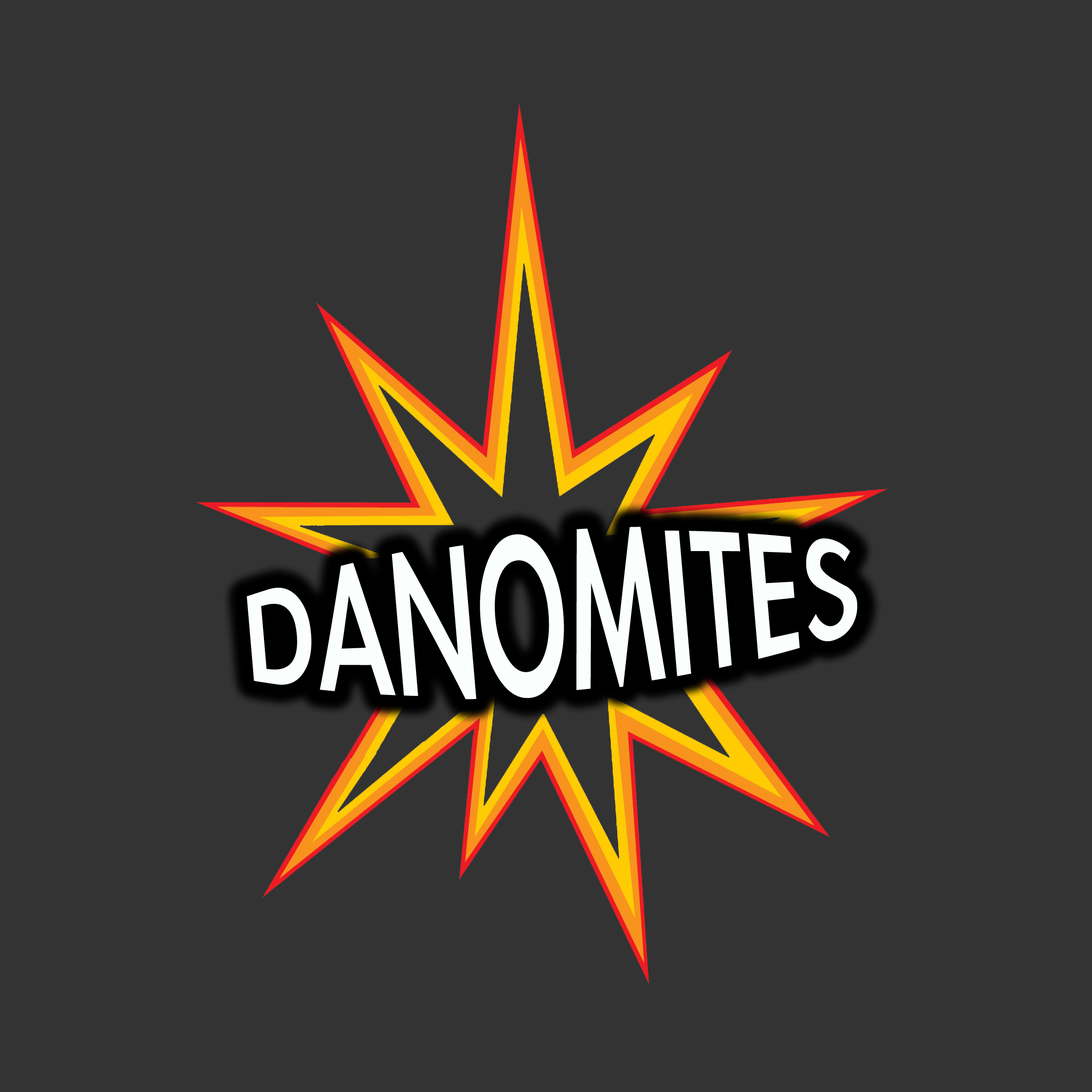
<style>
.page{position:relative;width:1092px;height:1092px;background:#333333}
.page>*{position:absolute;margin:0}
.t1{font:134.8px "LiGothicMed";letter-spacing:0.025em;color:#fafffe}
</style>
<div class="page">
<p class="t1" style="left:246px;top:527px;width:612px;height:172px;rotate:-5deg">DANOMITES</p>
</div>
